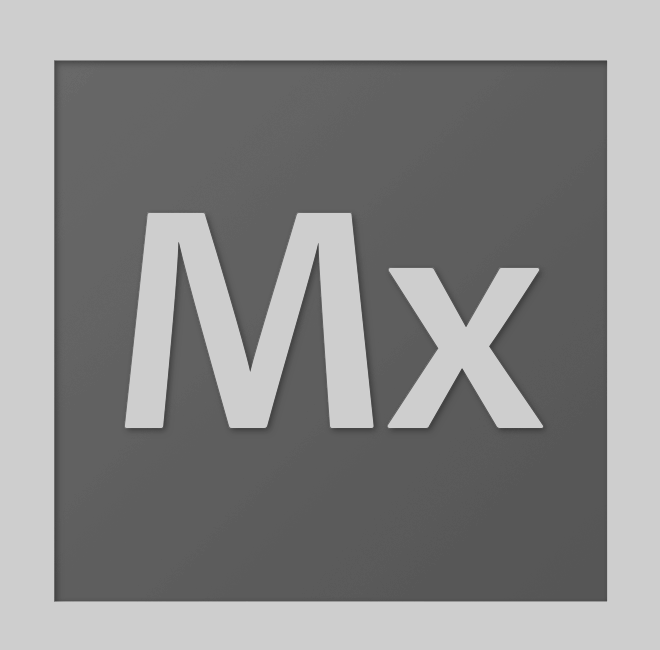
<style>
.page{position:relative;width:660px;height:650px;background:#cecece}
.page>*{position:absolute;margin:0}
.t1{font:329.2px "AdobeClean-Bold";letter-spacing:-0.04em;color:#cecece}
</style>
<div class="page">
<p class="t1" style="left:124px;top:213px;width:420px;height:215px">Mx</p>
</div>
